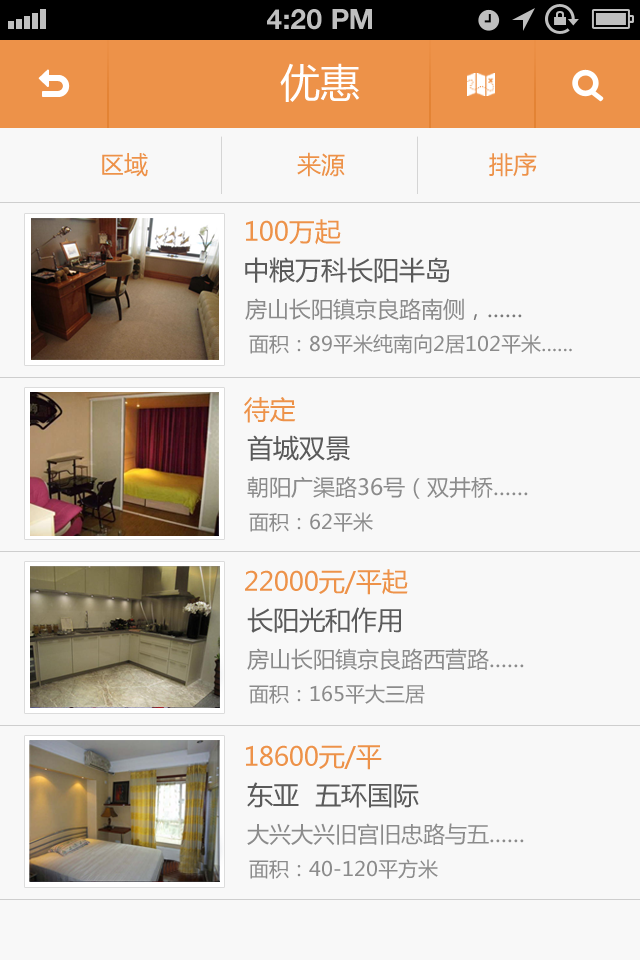
<style>
.page{position:relative;width:640px;height:960px;background:#f8f8f8}
.page>*{position:absolute;margin:0}
.t1{font:28px "HelveticaNeue-Bold";color:#bfbfbf;text-transform:uppercase}
.t2{font:40px "MicrosoftYaHei";color:#ffffff}
.t3{font:24px "MicrosoftYaHei";color:#ed9249}
.t4{font:26px "MicrosoftYaHei";color:#ed9249}
.t5{font:26px "MicrosoftYaHei";color:#5a5a5a}
.t6{font:22px "MicrosoftYaHei";color:#8b8b8b}
.t7{font:22px "MicrosoftYaHei";color:#797979}
.t8{font:20px "MicrosoftYaHei";color:#8b8b8b}
</style>
<div class="page">
<p class="t1" style="left:267px;top:9px;width:105px;height:21px">4:20 PM</p>
<p class="t2" style="left:280px;top:63px;width:80px;height:39px">优惠</p>
<p class="t3" style="left:102px;top:153px;width:46px;height:24px">区域</p>
<p class="t3" style="left:297px;top:152px;width:48px;height:25px">来源</p>
<p class="t3" style="left:489px;top:152px;width:48px;height:25px">排序</p>
<p class="t4" style="left:246px;top:219px;width:95px;height:26px">100万起</p>
<p class="t5" style="left:245px;top:257px;width:204px;height:26px">中粮万科长阳半岛</p>
<p class="t6" style="left:245px;top:298px;width:277px;height:22px">房山长阳镇京良路南侧<span class="t7">，……</span></p>
<p class="t8" style="left:249px;top:334px;width:323px;height:20px">面积：89平米纯南向2居102平米……</p>
<p class="t4" style="left:244px;top:397px;width:52px;height:26px">待定</p>
<p class="t5" style="left:247px;top:435px;width:103px;height:26px">首城双景</p>
<p class="t6" style="left:247px;top:476px;width:281px;height:23px">朝阳广渠路36号（双井桥……</p>
<p class="t8" style="left:249px;top:512px;width:124px;height:20px">面积：62平米</p>
<p class="t4" style="left:245px;top:569px;width:163px;height:26px">22000元/平起</p>
<p class="t5" style="left:247px;top:607px;width:154px;height:26px">长阳光和作用</p>
<p class="t6" style="left:247px;top:648px;width:277px;height:22px">房山长阳镇京良路西营路……</p>
<p class="t8" style="left:249px;top:684px;width:176px;height:20px">面积：165平大三居</p>
<p class="t4" style="left:246px;top:745px;width:136px;height:25px">18600元/平</p>
<p class="t5" style="left:247px;top:782px;width:172px;height:26px">东亚  五环国际</p>
<p class="t6" style="left:247px;top:823px;width:277px;height:22px">大兴大兴旧宫旧忠路与五……</p>
<p class="t8" style="left:249px;top:859px;width:189px;height:20px">面积：40-120平方米</p>
</div>
